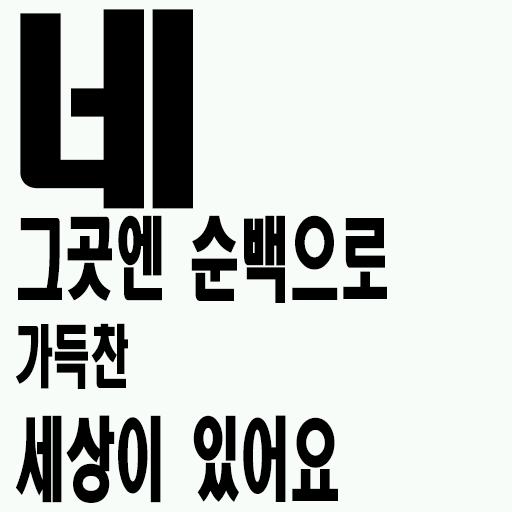
<style>
.page{position:relative;width:512px;height:512px;background:#f8fcf8}
.page>*{position:absolute;margin:0}
.t1{font:207px "HeadlineR-HM";color:#000000}
.t2{font:90px/100px "HeadlineR-HM";color:#000000;scale:0.56 1}
.t3{font:68.4px/100px "HeadlineR-HM";color:#000000;scale:0.56 1}
</style>
<div class="page">
<p class="t1" style="left:20px;top:9px;width:173px;height:200px">네</p>
<p class="t2" style="left:15px;top:215px;width:372px;height:288px">그곳엔 순백으로<br><span class="t3">가득찬<br></span>세상이 있어요</p>
</div>
